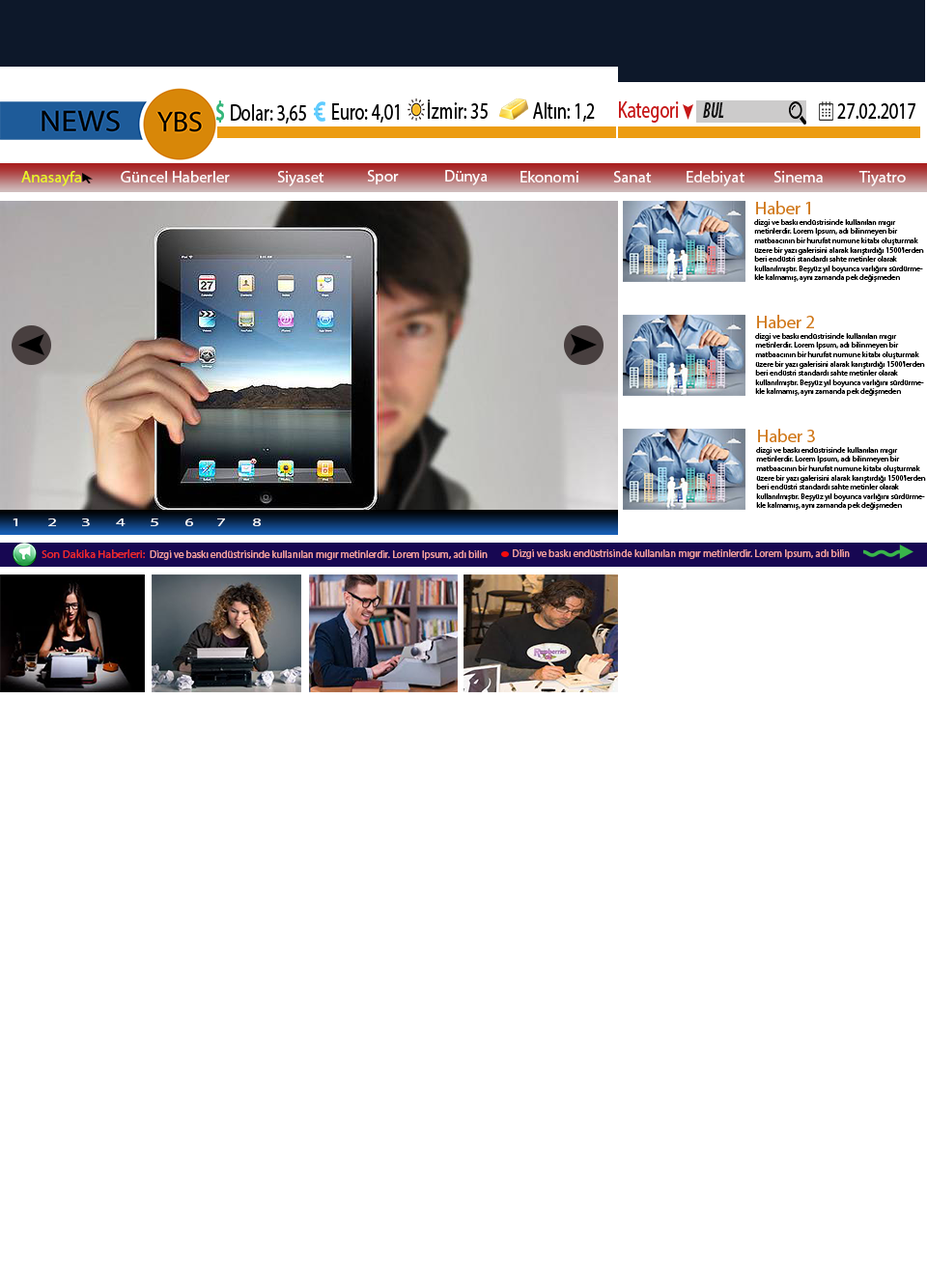
<style>
.page{position:relative;width:927px;height:1287px;background:#ffffff}
.page>*{position:absolute;margin:0}
.t1{font:23.2px "MyriadPro-Regular";color:#000000;scale:0.75 1}
.t2{font:23.2px "MyriadPro-Regular";color:#c61717;scale:0.75 1}
.t3{font:22.3px "MyriadPro-BoldCondIt";color:#111010;scale:0.75 1}
.t4{font:16px "MyriadPro-Regular";color:#eaf625}
.t5{font:16px "MyriadPro-Regular";color:#fdf9f9}
.t6{font:18px "MyriadPro-Regular";color:#d07718}
.t7{font:7.7px "MyriadPro-Regular";color:#000000}
.t8{font:11.5px "MyriadPro-Regular";color:#ffffff;scale:1.63 1}
.t9{font:11.5px "MyriadPro-Regular";color:#ef2929}
.t10{font:10.3px "MyriadPro-Regular";color:#f19d9d}
</style>
<div class="page">
<p class="t1" style="left:428px;top:99px;width:59px;height:20px">İzmir: 35</p>
<p class="t2" style="left:619px;top:101px;width:60px;height:22px">Kategori</p>
<p class="t1" style="left:231px;top:104px;width:75px;height:20px">Dolar: 3,65</p>
<p class="t1" style="left:332px;top:103px;width:67px;height:20px">Euro: 4,01</p>
<p class="t1" style="left:533px;top:102px;width:62px;height:20px">Altın: 1,2</p>
<p class="t3" style="left:703px;top:102px;width:21px;height:16px">BUL</p>
<p class="t1" style="left:837px;top:103px;width:78px;height:16px">27.02.2017</p>
<p class="t4" style="left:21px;top:171px;width:61px;height:15px">Anasayfa</p>
<p class="t5" style="left:121px;top:171px;width:109px;height:11px">Güncel Haberler</p>
<p class="t5" style="left:277px;top:171px;width:47px;height:15px">Siyaset</p>
<p class="t5" style="left:367px;top:170px;width:32px;height:14px">Spor</p>
<p class="t5" style="left:445px;top:170px;width:42px;height:15px">Dünya</p>
<p class="t5" style="left:520px;top:171px;width:58px;height:11px">Ekonomi</p>
<p class="t5" style="left:613px;top:171px;width:39px;height:11px">Sanat</p>
<p class="t5" style="left:686px;top:171px;width:58px;height:15px">Edebiyat</p>
<p class="t5" style="left:773px;top:171px;width:49px;height:11px">Sinema</p>
<p class="t5" style="left:858px;top:171px;width:47px;height:15px">Tiyatro</p>
<p class="t6" style="left:756px;top:201px;width:54px;height:13px">Haber 1</p>
<p class="t7" style="left:754px;top:219px;width:170px;height:63px">dizgi ve baskı endüstrisinde kullanılan mıgır metinlerdir. Lorem Ipsum, adı bilinmeyen bir matbaacının bir hurufat numune kitabı oluşturmak üzere bir yazı galerisini alarak karıştırdığı 1500'lerden beri endüstri standardı sahte metinler olarak kullanılmıştır. Beşyüz yıl boyunca varlığını sürdürmekle kalmamış, aynı zamanda pek değişmeden elektronik dizgiye de sıçramıştır.</p>
<p class="t6" style="left:757px;top:315px;width:57px;height:13px">Haber 2</p>
<p class="t7" style="left:755px;top:333px;width:170px;height:63px">dizgi ve baskı endüstrisinde kullanılan mıgır metinlerdir. Lorem Ipsum, adı bilinmeyen bir matbaacının bir hurufat numune kitabı oluşturmak üzere bir yazı galerisini alarak karıştırdığı 1500'lerden beri endüstri standardı sahte metinler olarak kullanılmıştır. Beşyüz yıl boyunca varlığını sürdürmekle kalmamış, aynı zamanda pek değişmeden elektronik dizgiye de sıçramıştır.</p>
<p class="t6" style="left:758px;top:429px;width:57px;height:13px">Haber 3</p>
<p class="t7" style="left:756px;top:447px;width:170px;height:63px">dizgi ve baskı endüstrisinde kullanılan mıgır metinlerdir. Lorem Ipsum, adı bilinmeyen bir matbaacının bir hurufat numune kitabı oluşturmak üzere bir yazı galerisini alarak karıştırdığı 1500'lerden beri endüstri standardı sahte metinler olarak kullanılmıştır. Beşyüz yıl boyunca varlığını sürdürmekle kalmamış, aynı zamanda pek değişmeden elektronik dizgiye de sıçramıştır.</p>
<p class="t8" style="left:13px;top:518px;width:4px;height:8px">1</p>
<p class="t8" style="left:48px;top:518px;width:8px;height:8px">2</p>
<p class="t8" style="left:82px;top:518px;width:8px;height:8px">3</p>
<p class="t8" style="left:116px;top:518px;width:9px;height:8px">4</p>
<p class="t8" style="left:151px;top:518px;width:7px;height:8px">5</p>
<p class="t8" style="left:185px;top:518px;width:8px;height:8px">6</p>
<p class="t8" style="left:217px;top:518px;width:8px;height:8px">7</p>
<p class="t8" style="left:253px;top:518px;width:8px;height:8px">8</p>
<p class="t9" style="left:42px;top:549px;width:103px;height:9px">Son Dakika Haberleri:</p>
<p class="t10" style="left:150px;top:550px;width:337px;height:10px">Dizgi ve baskı endüstrisinde kullanılan mıgır metinlerdir. Lorem Ipsum, adı bilin</p>
<p class="t10" style="left:513px;top:549px;width:336px;height:10px">Dizgi ve baskı endüstrisinde kullanılan mıgır metinlerdir. Lorem Ipsum, adı bilin</p>
</div>
